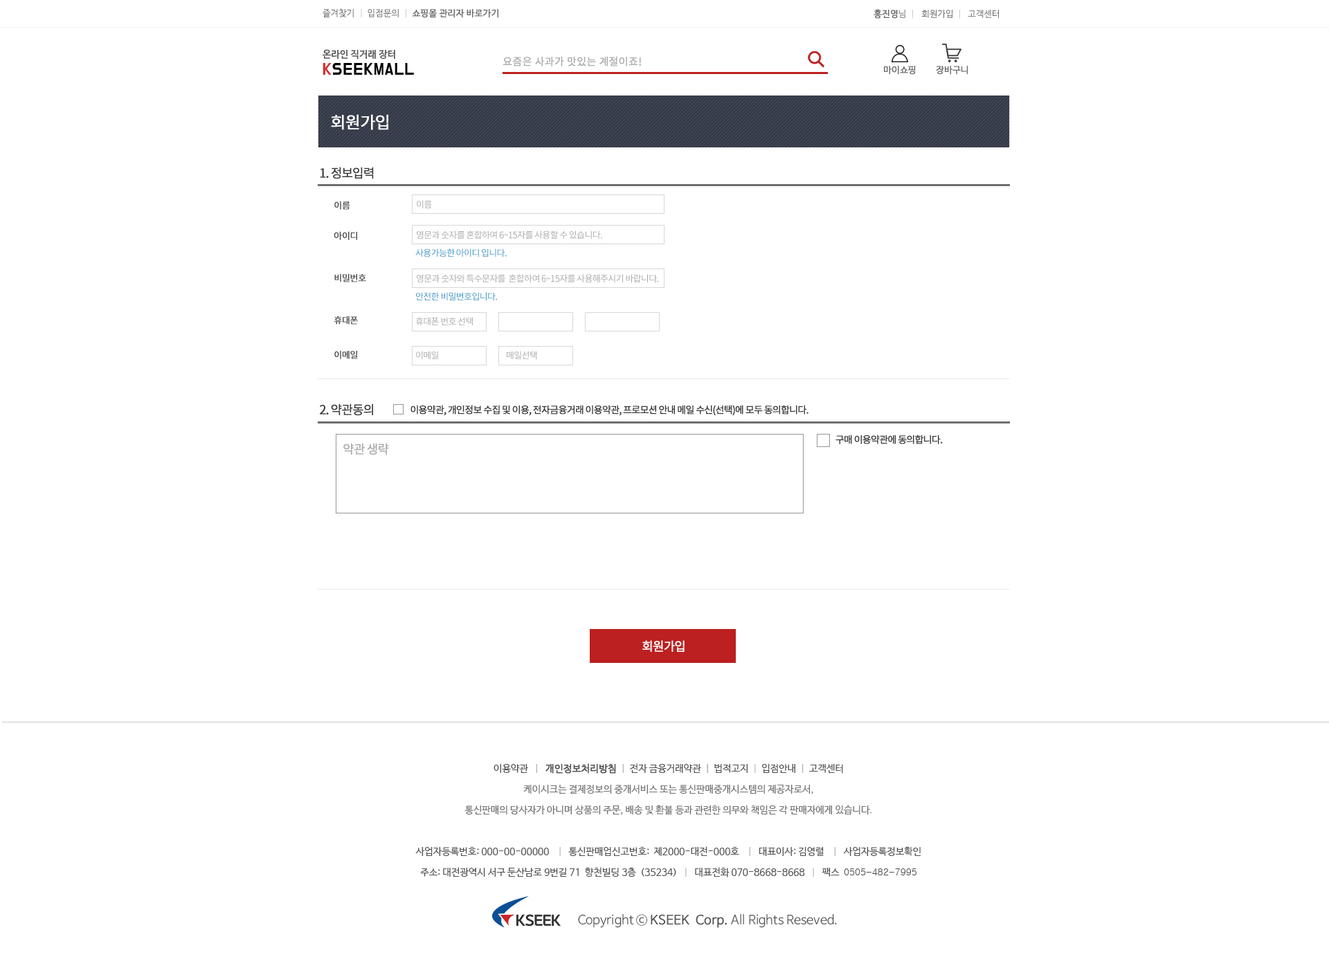
<style>
.page{position:relative;width:1329px;height:966px;background:#ffffff}
.page>*{position:absolute;margin:0}
.t1{font:9px "NanumBarunGothic";color:#686868;font-weight:bold}
.t2{font:9px "NanumBarunGothic";color:#686868}
.t3{font:9px "NanumBarunGothic";color:#cccccc}
.t4{font:9px "NanumBarunGothic";color:#696868}
.t5{font:9px "NanumBarunGothic";color:#696868;font-weight:bold}
.t6{font:10.4px "NotoSansCJKkr-Regular";color:#aaaaaa;font-weight:bold}
.t7{font:9px "NanumBarunGothic";color:#6a6a6a;font-weight:bold}
.t8{font:16.6px "NotoSansCJKkr-Regular";letter-spacing:-0.05em;color:#ffffff;font-weight:bold}
.t9{font:12.5px "NotoSansCJKkr-Regular";letter-spacing:-0.075em;color:#373737;font-weight:bold}
.t10{font:9px "NotoSansCJKkr-Regular";letter-spacing:-0.05em;color:#484848;font-weight:bold}
.t11{font:9px "NotoSansCJKkr-Regular";letter-spacing:-0.05em;color:#a7a7a7}
.t12{font:9px "NotoSansCJKkr-Regular";letter-spacing:-0.05em;color:#2391c4}
.t13{font:9.7px "NotoSansCJKkr-Regular";letter-spacing:-0.075em;color:#373737;font-weight:bold}
.t14{font:12.5px "NotoSansCJKkr-Regular";letter-spacing:-0.075em;color:#acacac;font-weight:bold}
.t15{font:12.5px "NotoSansCJKkr-Regular";letter-spacing:-0.075em;color:#ffffff;font-weight:bold}
.t16{font:9.7px/20.8px "NanumBarunGothic";color:#727272}
.t17{font:9.7px/20.8px "NanumBarunGothic";color:#515151}
.t18{font:9.7px/20.8px "NanumBarunGothic";color:#b3b3b3}
.t19{font:9.7px/20.8px "NanumBarunGothic";color:#515151;font-weight:bold}
.t20{font:9.7px/20.8px "NanumBarunGothic";color:#949494}
.t21{font:9.7px/20.8px "Gulim";color:#515151}
.t22{font:12.5px "NanumBarunGothicOTFLight";color:#515151}
.t23{font:12.5px "NanumBarunGothicOTFLight";color:#515151;font-weight:bold}
</style>
<div class="page">
<p class="t1" style="left:323px;top:9px;width:175px;height:9px"><span class="t2">즐겨찾기  </span><span class="t3">| </span><span class="t2"> 입점문의  </span><span class="t3">|  </span>쇼핑몰 관리자 바로가기</p>
<p class="t4" style="left:874px;top:9px;width:125px;height:10px"><span class="t5">홍진영</span>님  <span class="t3">|   </span>회원가입  <span class="t3">|   </span>고객센터</p>
<p class="t6" style="left:503px;top:56px;width:138px;height:10px">요즘은 사과가 맛있는 계절이죠!</p>
<p class="t7" style="left:884px;top:66px;width:32px;height:9px">마이쇼핑</p>
<p class="t7" style="left:936px;top:66px;width:33px;height:9px">장바구니</p>
<p class="t8" style="left:331px;top:114px;width:57px;height:16px">회원가입</p>
<p class="t9" style="left:320px;top:167px;width:54px;height:12px">1. 정보입력</p>
<p class="t10" style="left:334px;top:201px;width:16px;height:9px">이름</p>
<p class="t11" style="left:417px;top:200px;width:15px;height:9px">이름</p>
<p class="t10" style="left:334px;top:231px;width:23px;height:9px">아이디</p>
<p class="t11" style="left:417px;top:231px;width:185px;height:9px">영문과 숫자를 혼합하여 6~15자를 사용할 수 있습니다.</p>
<p class="t12" style="left:415px;top:249px;width:92px;height:9px">사용가능한 아이디 입니다.</p>
<p class="t10" style="left:334px;top:273px;width:32px;height:9px">비밀번호</p>
<p class="t11" style="left:417px;top:274px;width:242px;height:9px">영문과 숫자와 특수문자를  혼합하여 6~15자를 사용해주시기 바랍니다.</p>
<p class="t12" style="left:416px;top:292px;width:81px;height:9px">안전한 비밀번호입니다.</p>
<p class="t10" style="left:334px;top:316px;width:24px;height:9px">휴대폰</p>
<p class="t11" style="left:415px;top:317px;width:58px;height:8px">휴대폰 번호 선택</p>
<p class="t10" style="left:334px;top:350px;width:24px;height:9px">이메일</p>
<p class="t11" style="left:416px;top:351px;width:23px;height:9px">이메일</p>
<p class="t11" style="left:507px;top:351px;width:30px;height:8px">메일선택</p>
<p class="t9" style="left:320px;top:404px;width:53px;height:12px">2. 약관동의</p>
<p class="t13" style="left:411px;top:405px;width:398px;height:11px">이용약관, 개인정보 수집 및 이용, 전자금융거래 이용약관, 프로모션 안내 메일 수신(선택)에 모두 동의합니다.</p>
<p class="t13" style="left:836px;top:435px;width:107px;height:9px">구매 이용약관에 동의합니다.</p>
<p class="t14" style="left:343px;top:443px;width:46px;height:12px">약관 생략</p>
<p class="t15" style="left:642px;top:640px;width:43px;height:12px">회원가입</p>
<p class="t16" style="left:415px;top:764px;width:506px;height:114px;text-align:center"><span class="t17">이용약관  </span><span class="t18"> |   </span><span class="t19">개인정보처리방침</span><span class="t18">  |  </span><span class="t17">전자 금융거래약관</span><span class="t20">  |  </span><span class="t17">법적고지</span><span class="t18">  | </span><span class="t17"> 입점안내 </span><span class="t18"> |  </span><span class="t17">고객센터<br></span>케이시크는 결제정보의 중개서비스 또는 통신판매중개시스템의 제공자로서, <br>통신판매의 당사자가 아니며 상품의 주문, 배송 및 환불 등과 관련한 의무와 책임은 각 판매자에게 있습니다.<br><span class="t17"><br>사업자등록번호: 000-00-00000   </span><span class="t18"> | </span><span class="t17">  통신판매업신고번호:  제2000-대전-000호  </span><span class="t18">  |   </span><span class="t17">대표이사: 김영렬 </span><span class="t18">   |   </span><span class="t17">사업자등록정보확인<br>주소: 대전광역시 서구 둔산남로 9번길 71  향천빌딩 3층  (35234)</span><span class="t18">   |  </span><span class="t17"> 대표전화 070-8668-8668 </span><span class="t18">  |  </span><span class="t17"> 팩스  </span><span class="t21">0505-482-7995</span></p>
<p class="t22" style="left:578px;top:914px;width:259px;height:14px">Copyright ⓒ <span class="t23">KSEEK  Corp.</span> All Rights Reseved.</p>
</div>
